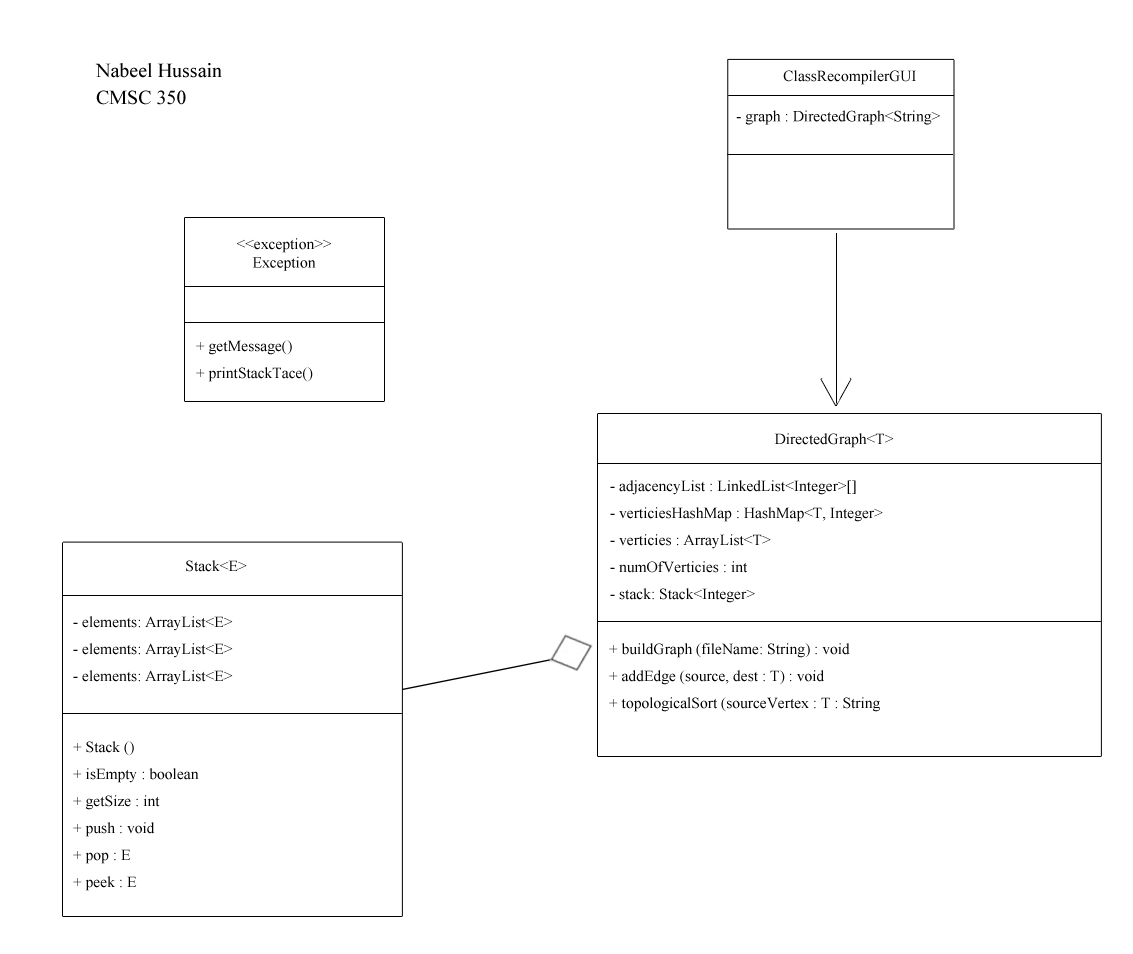
<style>
.page{position:relative;width:1133px;height:954px;background:#ffffff}
.page>*{position:absolute;margin:0}
.t1{font:20px/27px "TimesNewRomanPSMT";color:#000000}
.t2{font:15.5px "TimesNewRomanPSMT";color:#000000}
.t3{font:15.5px/27px "TimesNewRomanPSMT";color:#000000}
</style>
<div class="page">
<p class="t1" style="left:95px;top:63px;width:127px;height:42px">Nabeel Hussain<br>CMSC 350</p>
<p class="t2" style="left:783px;top:70px;width:133px;height:15px">ClassRecompilerGUI</p>
<p class="t2" style="left:736px;top:110px;width:204px;height:15px">- graph : DirectedGraph&lt;String&gt;</p>
<p class="t2" style="left:236px;top:238px;width:96px;height:33px;text-align:center">&lt;&lt;exception&gt;&gt;<br>Exception</p>
<p class="t3" style="left:196px;top:340px;width:117px;height:42px">+ getMessage()<br>+ printStackTace()</p>
<p class="t2" style="left:774px;top:433px;width:120px;height:15px">DirectedGraph&lt;T&gt;</p>
<p class="t3" style="left:610px;top:480px;width:273px;height:123px">- adjacencyList : LinkedList&lt;Integer&gt;[]<br>- verticiesHashMap : HashMap&lt;T, Integer&gt;<br>- verticies : ArrayList&lt;T&gt;<br>- numOfVerticies : int<br>- stack: Stack&lt;Integer&gt;</p>
<p class="t2" style="left:186px;top:560px;width:61px;height:12px">Stack&lt;E&gt;</p>
<p class="t3" style="left:73px;top:616px;width:160px;height:69px">- elements: ArrayList&lt;E&gt;<br>- elements: ArrayList&lt;E&gt;<br>- elements: ArrayList&lt;E&gt;</p>
<p class="t3" style="left:609px;top:643px;width:271px;height:69px">+ buildGraph (fileName: String) : void<br>+ addEdge (source, dest : T) : void<br>+ topologicalSort (sourceVertex : T : String</p>
<p class="t3" style="left:73px;top:741px;width:126px;height:150px">+ Stack ()<br>+ isEmpty : boolean<br>+ getSize : int<br>+ push : void<br>+ pop : E<br>+ peek : E</p>
</div>
